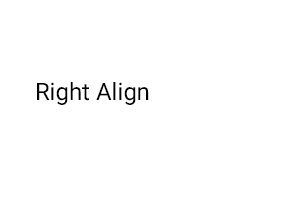
<style>
.page{position:relative;width:300px;height:200px;background:#ffffff}
.page>*{position:absolute;margin:0}
.t1{font:24px "Roboto-Regular";color:#000000}
</style>
<div class="page">
<p class="t1" style="left:37px;top:82px;width:112px;height:23px">Right Align</p>
</div>
